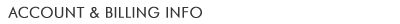
<style>
.page{position:relative;width:400px;height:24px;background:#ffffff}
.page>*{position:absolute;margin:0}
.t1{font:14.7px "FuturaBT-Light";letter-spacing:0.025em;color:#363636;text-transform:uppercase;font-weight:bold}
</style>
<div class="page">
<p class="t1" style="left:8px;top:6px;width:194px;height:12px">ACCOUNT &amp; billing INFO</p>
</div>
